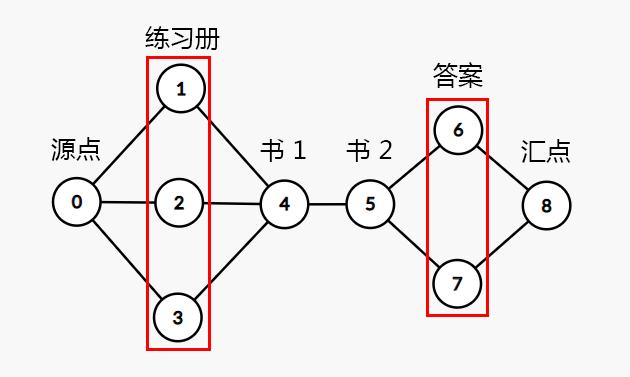
<style>
.page{position:relative;width:630px;height:377px;background:#f8f8f8}
.page>*{position:absolute;margin:0}
.t1{font:25px "MicrosoftYaHei";color:#000000}
</style>
<div class="page">
<p class="t1" style="left:145px;top:26px;width:75px;height:24px">练习册</p>
<p class="t1" style="left:433px;top:62px;width:50px;height:26px">答案</p>
<p class="t1" style="left:51px;top:137px;width:49px;height:24px">源点</p>
<p class="t1" style="left:260px;top:139px;width:46px;height:23px">书 1</p>
<p class="t1" style="left:346px;top:139px;width:46px;height:23px">书 2</p>
<p class="t1" style="left:521px;top:139px;width:49px;height:24px">汇点</p>
</div>
